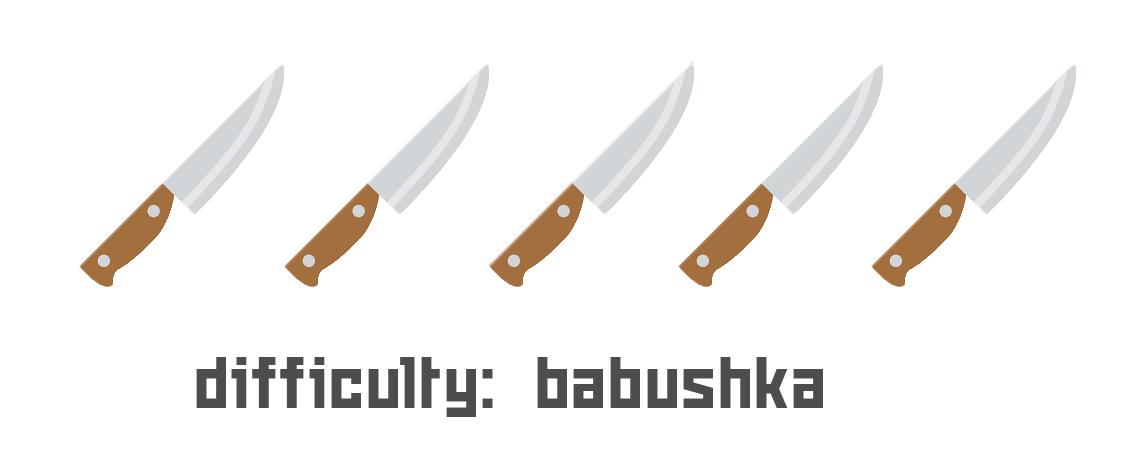
<style>
.page{position:relative;width:1132px;height:469px;background:#ffffff}
.page>*{position:absolute;margin:0}
.t1{font:75px "Snowstorm";color:#4d4d4b}
</style>
<div class="page">
<p class="t1" style="left:196px;top:357px;width:627px;height:60px">difficulty:  babushka</p>
</div>
